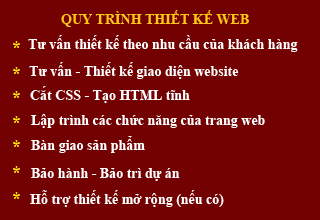
<style>
.page{position:relative;width:320px;height:220px;background:#730101}
.page>*{position:absolute;margin:0}
.t1{font:14px "TimesNewRomanPS-BoldMT";color:#ffc716}
.t2{font:14px "TimesNewRomanPS-BoldMT";color:#feffff}
</style>
<div class="page">
<p class="t1" style="left:61px;top:10px;width:188px;height:17px">QUY TRÌNH THIẾT KẾ WEB</p>
<p class="t2" style="left:28px;top:35px;width:270px;height:17px">Tư vấn thiết kế theo nhu cầu của khách hàng</p>
<p class="t2" style="left:29px;top:62px;width:210px;height:17px">Tư vấn - Thiết kế giao diện website</p>
<p class="t2" style="left:30px;top:86px;width:160px;height:17px">Cắt CSS - Tạo HTML tĩnh</p>
<p class="t2" style="left:31px;top:114px;width:234px;height:14px">Lập trình các chức năng của trang web</p>
<p class="t2" style="left:31px;top:136px;width:114px;height:17px">Bàn giao sản phẩm</p>
<p class="t2" style="left:31px;top:168px;width:149px;height:13px">Bảo hành - Bảo trì dự án</p>
<p class="t2" style="left:30px;top:190px;width:194px;height:17px">Hỗ trợ thiết kế mở rộng (nếu có)</p>
</div>
